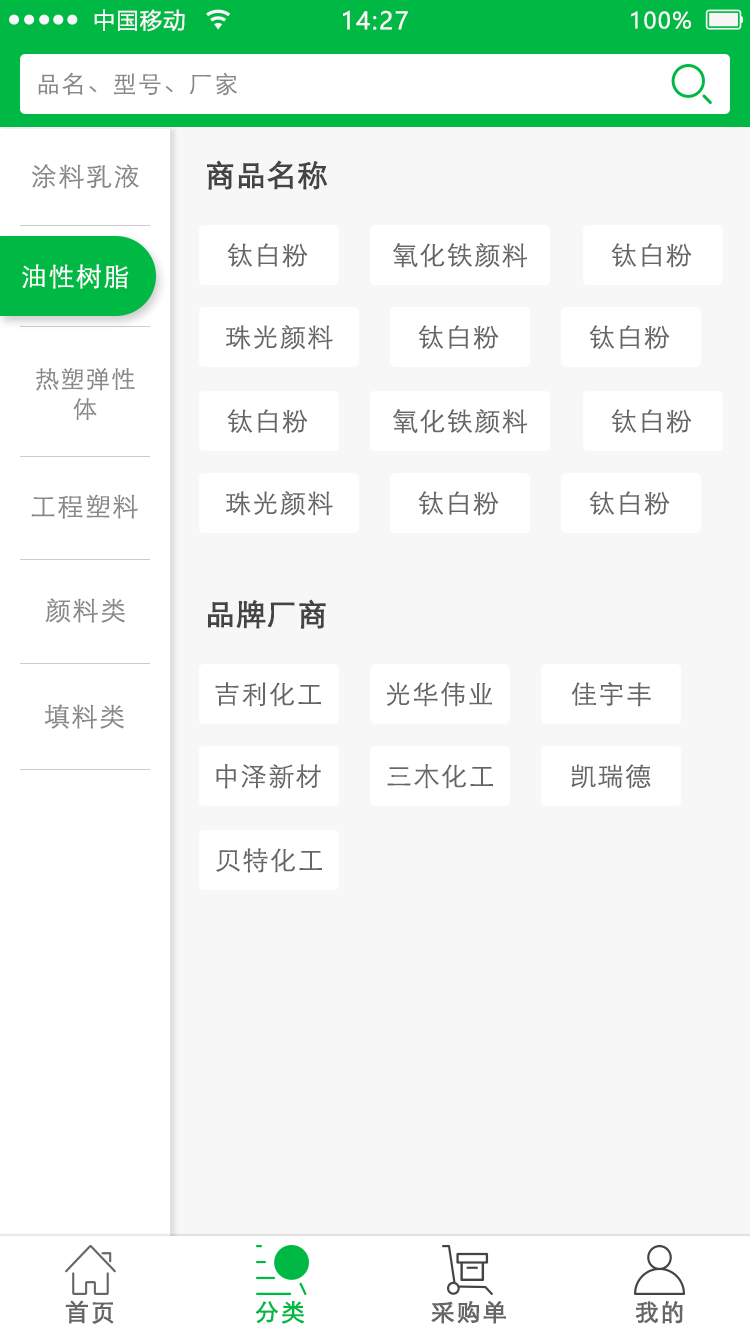
<style>
.page{position:relative;width:750px;height:1334px;background:#f7f7f7}
.page>*{position:absolute;margin:0}
.t1{font:22px "MicrosoftYaHei";letter-spacing:0.06em;color:#f7f7f7}
.t2{font:24px "MicrosoftYaHei";letter-spacing:0.06em;color:#f7f7f7}
.t3{font:24px "STXihei";letter-spacing:0.06em;color:#888888}
.t4{font:30px "STXihei";color:#444444;font-weight:bold}
.t5{font:25.9px "STXihei";letter-spacing:0.06em;color:#888888}
.t6{font:25.9px "STXihei";letter-spacing:0.06em;color:#666666}
.t7{font:25.9px "STXihei";letter-spacing:0.06em;color:#ffffff}
.t8{font:24px/30px "STXihei";letter-spacing:0.06em;color:#888888}
.t9{font:26px "STXihei";letter-spacing:0.06em;color:#666666}
.t10{font:23.9px "STXihei";letter-spacing:0.06em;color:#666666;font-weight:bold}
.t11{font:23.9px "STXihei";letter-spacing:0.06em;color:#00b945;font-weight:bold}
</style>
<div class="page">
<p class="t1" style="left:94px;top:9px;width:91px;height:23px">中国移动</p>
<p class="t2" style="left:343px;top:10px;width:65px;height:20px">14:27</p>
<p class="t1" style="left:631px;top:11px;width:60px;height:18px">100%</p>
<p class="t3" style="left:38px;top:72px;width:199px;height:24px">品名、型号、厂家</p>
<p class="t4" style="left:207px;top:160px;width:121px;height:30px">商品名称</p>
<p class="t5" style="left:32px;top:164px;width:107px;height:25px">涂料乳液</p>
<p class="t6" style="left:227px;top:243px;width:81px;height:25px">钛白粉</p>
<p class="t6" style="left:393px;top:243px;width:134px;height:25px">氧化铁颜料</p>
<p class="t6" style="left:611px;top:243px;width:81px;height:25px">钛白粉</p>
<p class="t7" style="left:22px;top:264px;width:107px;height:25px">油性树脂</p>
<p class="t6" style="left:226px;top:325px;width:107px;height:25px">珠光颜料</p>
<p class="t6" style="left:418px;top:325px;width:81px;height:25px">钛白粉</p>
<p class="t6" style="left:589px;top:325px;width:81px;height:25px">钛白粉</p>
<p class="t8" style="left:36px;top:367px;width:99px;height:53px;text-align:center">热塑弹性<br>体</p>
<p class="t6" style="left:227px;top:409px;width:81px;height:25px">钛白粉</p>
<p class="t6" style="left:393px;top:409px;width:134px;height:25px">氧化铁颜料</p>
<p class="t6" style="left:611px;top:409px;width:81px;height:25px">钛白粉</p>
<p class="t5" style="left:31px;top:494px;width:107px;height:25px">工程塑料</p>
<p class="t6" style="left:226px;top:491px;width:107px;height:25px">珠光颜料</p>
<p class="t6" style="left:418px;top:491px;width:81px;height:25px">钛白粉</p>
<p class="t6" style="left:589px;top:491px;width:81px;height:25px">钛白粉</p>
<p class="t5" style="left:45px;top:598px;width:80px;height:25px">颜料类</p>
<p class="t4" style="left:207px;top:599px;width:119px;height:30px">品牌厂商</p>
<p class="t9" style="left:215px;top:682px;width:106px;height:25px">吉利化工</p>
<p class="t9" style="left:387px;top:682px;width:105px;height:25px">光华伟业</p>
<p class="t9" style="left:571px;top:682px;width:80px;height:25px">佳宇丰</p>
<p class="t5" style="left:44px;top:704px;width:80px;height:25px">填料类</p>
<p class="t9" style="left:216px;top:764px;width:105px;height:25px">中泽新材</p>
<p class="t9" style="left:387px;top:764px;width:106px;height:25px">三木化工</p>
<p class="t9" style="left:571px;top:764px;width:80px;height:25px">凯瑞德</p>
<p class="t9" style="left:216px;top:848px;width:106px;height:25px">贝特化工</p>
<p class="t10" style="left:65px;top:1300px;width:49px;height:24px">首页</p>
<p class="t11" style="left:255px;top:1301px;width:49px;height:23px">分类</p>
<p class="t10" style="left:431px;top:1300px;width:75px;height:24px">采购单</p>
<p class="t10" style="left:635px;top:1300px;width:48px;height:24px">我的</p>
</div>
